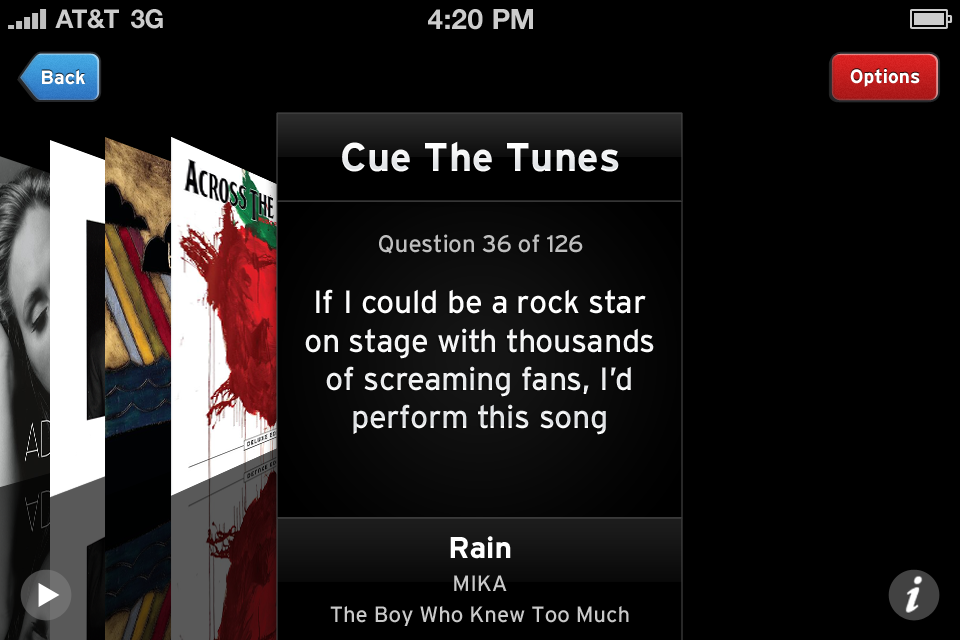
<style>
.page{position:relative;width:960px;height:640px;background:#000000}
.page>*{position:absolute;margin:0}
.t1{font:26px "HelveticaNeue-Bold";color:#cccccc;text-transform:uppercase}
.t2{font:28px "HelveticaNeue-Bold";color:#cccccc;text-transform:uppercase}
.t3{font:19.2px "Interstate-Bold";color:#ffffff}
.t4{font:40px "Interstate-Bold";color:#ffffff}
.t5{font:24px "Interstate-Regular";color:#bfbfbf}
.t6{font:32px "Interstate-Regular";color:#ffffff}
.t7{font:30px "Interstate-Bold";color:#ffffff}
.t8{font:22px "Interstate-Regular";color:#c9c9c9}
</style>
<div class="page">
<p class="t1" style="left:55px;top:9px;width:64px;height:20px">AT&amp;T</p>
<p class="t1" style="left:131px;top:9px;width:32px;height:20px">3G</p>
<p class="t2" style="left:428px;top:9px;width:105px;height:21px">4:20 pM</p>
<p class="t3" style="left:42px;top:70px;width:43px;height:15px">Back</p>
<p class="t3" style="left:850px;top:69px;width:70px;height:18px">Options</p>
<p class="t4" style="left:342px;top:141px;width:277px;height:31px">Cue The Tunes</p>
<p class="t5" style="left:379px;top:234px;width:204px;height:20px">Question 36 of 126</p>
<p class="t6" style="left:305px;top:289px;width:349px;height:146px;text-align:center">If I could be a rock star on stage with thousands of screaming fans, I’d perform this song</p>
<p class="t7" style="left:450px;top:536px;width:61px;height:23px">Rain</p>
<p class="t8" style="left:454px;top:575px;width:53px;height:17px">MIKA</p>
<p class="t8" style="left:330px;top:606px;width:299px;height:20px">The Boy Who Knew Too Much</p>
</div>
